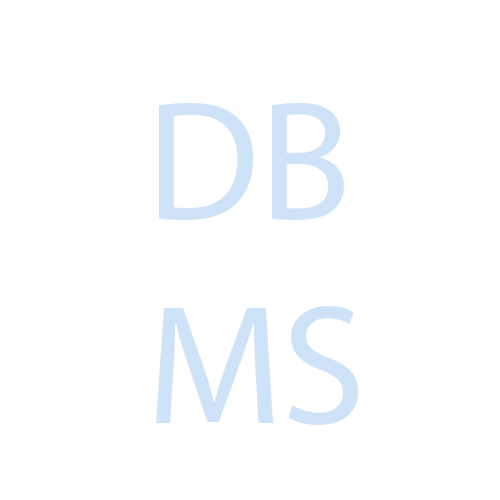
<style>
.page{position:relative;width:500px;height:500px;background:#ffffff}
.page>*{position:absolute;margin:0}
.t1{font:170px "MyriadPro-Regular";color:#cee3f8}
</style>
<div class="page">
<p class="t1" style="left:156px;top:102px;width:203px;height:323px">DB MS</p>
</div>
